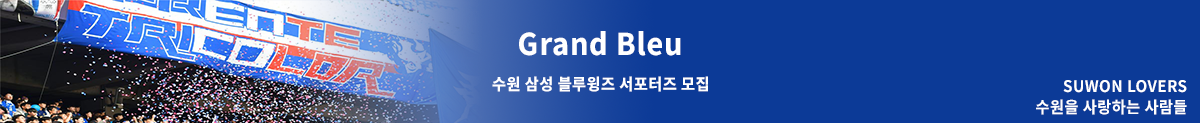
<style>
.page{position:relative;width:1200px;height:123px;background:#0c3a97}
.page>*{position:absolute;margin:0}
.t1{font:30px "NotoSansKR-ExtraBold";letter-spacing:0.03em;color:#ffffff;scale:0.95 1}
.t2{font:16px "NotoSansKR-ExtraBold";letter-spacing:0.03em;color:#ffffff;scale:0.95 1}
.t3{font:16px "NotoSansKR-Bold";letter-spacing:0.03em;color:#ffffff;scale:0.95 1}
</style>
<div class="page">
<p class="t1" style="left:519px;top:31px;width:162px;height:25px">Grand Bleu</p>
<p class="t2" style="left:492px;top:76px;width:216px;height:16px">수원 삼성 블루윙즈 서포터즈 모집</p>
<p class="t3" style="left:1063px;top:80px;width:124px;height:13px">SUWON LOVERS</p>
<p class="t3" style="left:1036px;top:99px;width:151px;height:16px">수원을 사랑하는 사람들</p>
</div>
